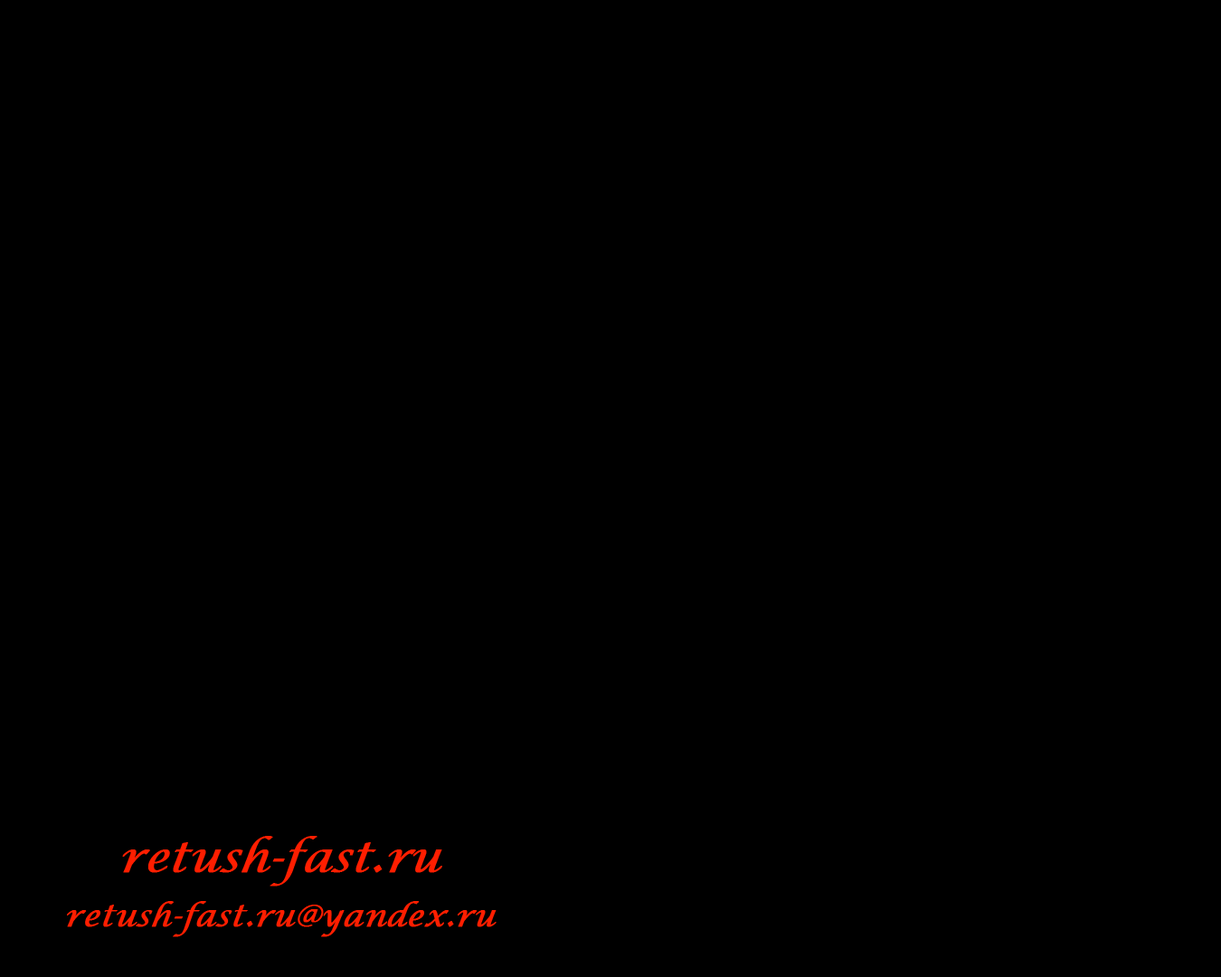
<style>
.page{position:relative;width:1221px;height:977px;background:#000000}
.page>*{position:absolute;margin:0}
.t1{font:42.1px "LucidaCalligraphy-Italic";color:#ff1e00;font-weight:bold;font-style:italic}
.t2{font:30.1px "LucidaCalligraphy-Italic";color:#ff1e00;font-weight:bold;font-style:italic}
</style>
<div class="page">
<p class="t1" style="left:122px;top:836px;width:320px;height:50px">retush-fast.ru</p>
<p class="t2" style="left:67px;top:901px;width:429px;height:36px">retush-fast.ru@yandex.ru</p>
</div>
